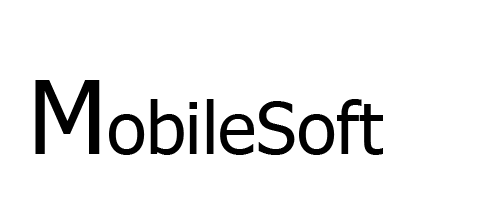
<style>
.page{position:relative;width:500px;height:200px;background:#ffffff}
.page>*{position:absolute;margin:0}
.t1{font:72px "Tahoma";color:#000000}
.t2{font:102px "Tahoma";color:#000000}
</style>
<div class="page">
<p class="t1" style="left:35px;top:80px;width:348px;height:75px"><span class="t2">M</span>obileSoft</p>
</div>
